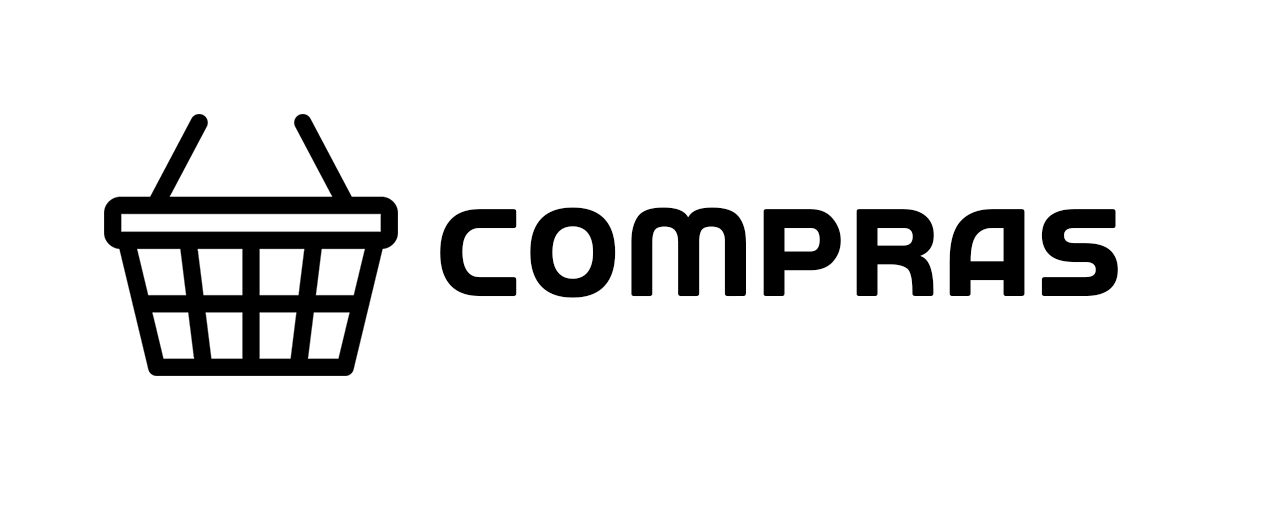
<style>
.page{position:relative;width:1264px;height:512px;background:#ffffff}
.page>*{position:absolute;margin:0}
.t1{font:117.8px "aAutobusOmnibus";color:#000000}
</style>
<div class="page">
<p class="t1" style="left:440px;top:207px;width:678px;height:91px">Compras</p>
</div>
